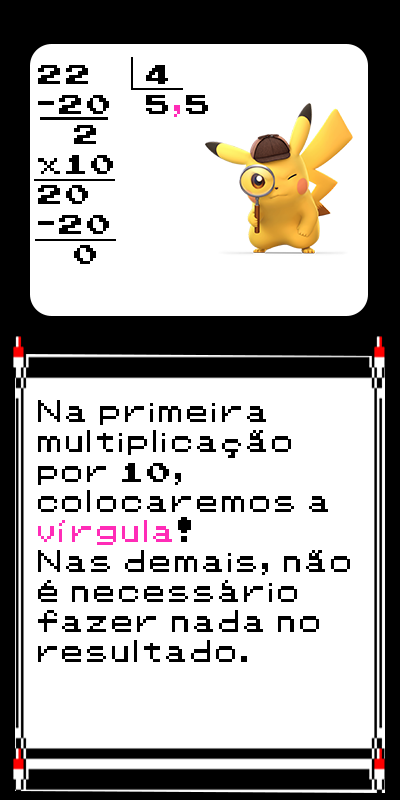
<style>
.page{position:relative;width:400px;height:800px;background:#ffffff}
.page>*{position:absolute;margin:0}
.t1{font:25px "Pokemon-Classic";color:#000000}
.t2{font:25px "Pokemon-Classic";color:#ff2cb7}
</style>
<div class="page">
<p class="t1" style="left:38px;top:65px;width:170px;height:199px">22   4<br>-20  5<span class="t2">,</span>5<br> 2 <br>x10<br>20<br>-20<br> 0</p>
<p class="t1" style="left:38px;top:400px;width:312px;height:262px">Na primeira<br>multiplicação<br>por 10,<br>colocaremos a<br><span class="t2">vírgula</span>!<br>Nas demais, não<br>é necessário<br>fazer nada no<br>resultado.</p>
</div>
